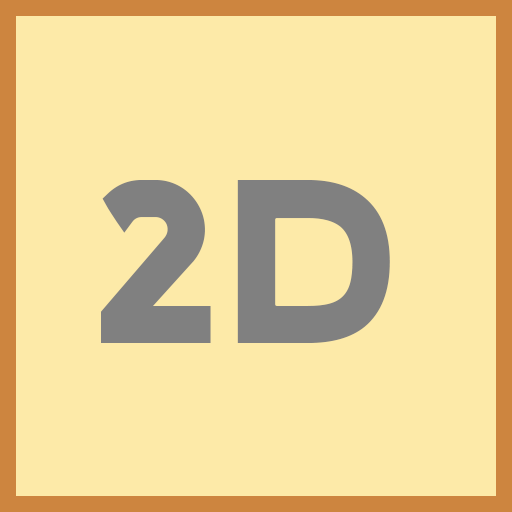
<style>
.page{position:relative;width:512px;height:512px;background:#fdeaa8}
.page>*{position:absolute;margin:0}
.t1{font:233.3px "DOCKERONE";color:#808080}
</style>
<div class="page">
<p class="t1" style="left:101px;top:180px;width:289px;height:163px">2D</p>
</div>
